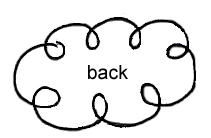
<style>
.page{position:relative;width:211px;height:138px;background:#ffffff}
.page>*{position:absolute;margin:0}
.t1{font:19.4px "ArialMT";color:#000000}
</style>
<div class="page">
<p class="t1" style="left:88px;top:65px;width:40px;height:15px">back</p>
</div>
